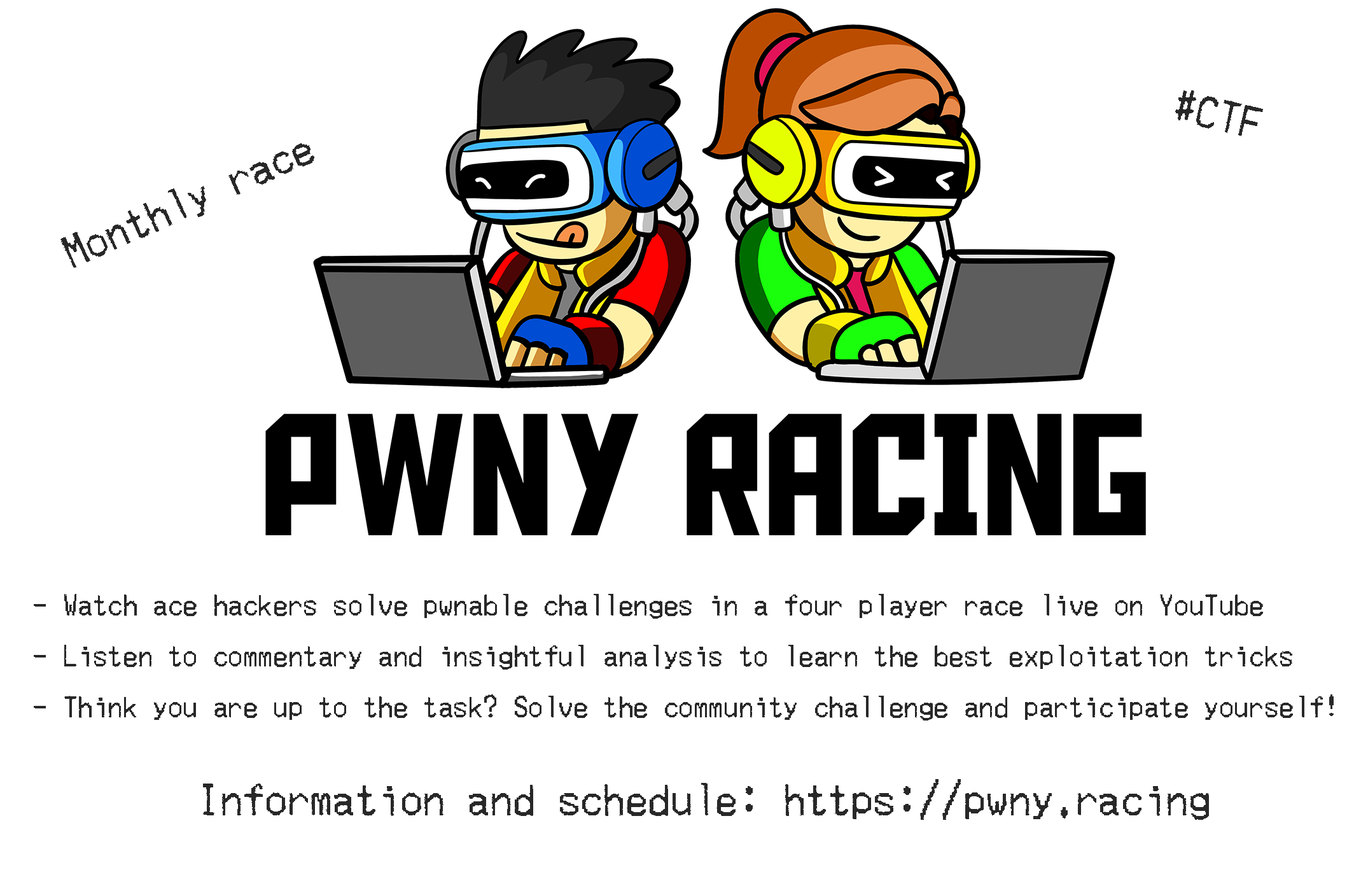
<style>
.page{position:relative;width:1368px;height:872px;background:#ffffff}
.page>*{position:absolute;margin:0}
.t1{font:63.6px "MerchantCopy";color:#282828}
.t2{font:42.4px "MerchantCopy";color:#282828}
</style>
<div class="page">
<p class="t1" style="left:1175px;top:90px;width:88px;height:46px;rotate:13deg">#CTF</p>
<p class="t1" style="left:60px;top:143px;width:254px;height:125px;rotate:-24deg">Monthly race</p>
<p class="t2" style="left:34px;top:594px;width:1300px;height:126px">- Watch ace hackers solve pwnable challenges in a four player race live on YouTube<br>- Listen to commentary and insightful analysis to learn the best exploitation tricks<br>- Think you are up to the task? Solve the community challenge and participate yourself!</p>
<p class="t1" style="left:203px;top:779px;width:1006px;height:41px">Information and schedule: https://pwny.racing</p>
</div>
